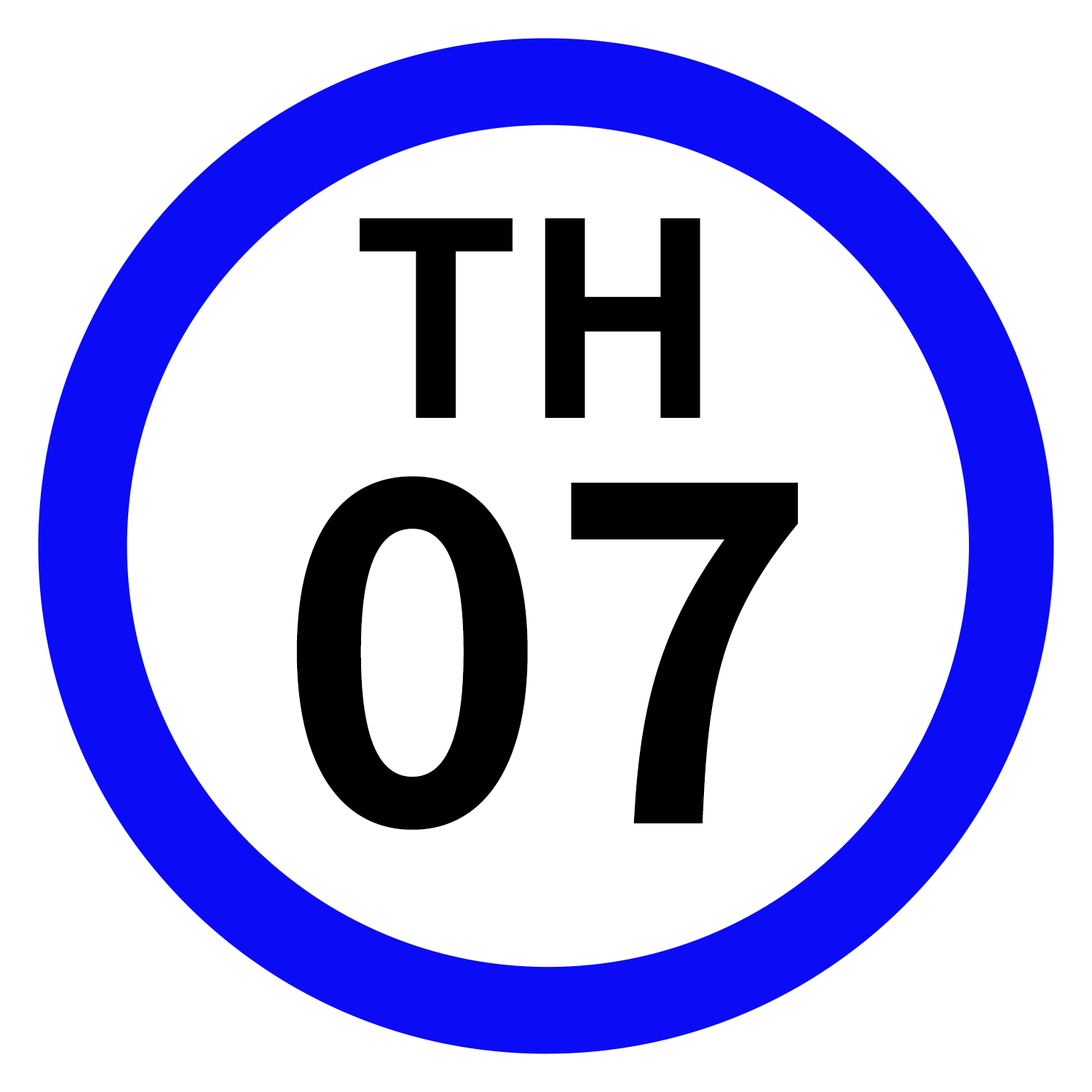
<style>
.page{position:relative;width:1092px;height:1092px;background:#ffffff}
.page>*{position:absolute;margin:0}
.t1{font:269.8px "NotoSansJP-Bold";color:#000000}
.t2{font:460.5px "NotoSansJP-Bold";color:#000000}
</style>
<div class="page">
<p class="t1" style="left:360px;top:218px;width:340px;height:200px">TH</p>
<p class="t2" style="left:296px;top:476px;width:502px;height:354px">07</p>
</div>
